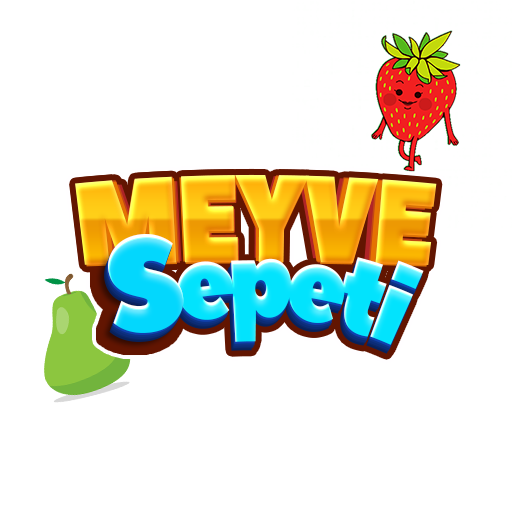
<style>
.page{position:relative;width:512px;height:512px;background:#ffffff}
.page>*{position:absolute;margin:0}
.t1{font:115px "PeaceSans";letter-spacing:-0.025em;scale:0.83 1}
.t2{font:112.7px "PeaceSans";letter-spacing:-0.025em;scale:0.83 1}
.t3{font:113.9px "PeaceSans";letter-spacing:-0.025em;scale:0.83 1}
.t4{font:110.5px "PeaceSans";letter-spacing:-0.025em;scale:0.83 1}
.t5{font:111.6px "PeaceSans";letter-spacing:-0.025em;scale:0.83 1}
.t6{font:108.3px "PeaceSans";letter-spacing:-0.025em;scale:0.83 1}
.t7{font:109.4px "PeaceSans";letter-spacing:-0.025em;scale:0.83 1}
.t8{font:107.2px "PeaceSans";letter-spacing:-0.025em;scale:0.83 1}
.t9{font:134.9px "PeaceSans";color:#03d7fd;scale:0.91 1}
.t10{font:102.9px "PeaceSans";letter-spacing:-0.075em;color:#02e3fd;scale:0.77 1}
</style>
<div class="page">
<p class="t1" style="left:75px;top:174px;width:362px;height:91px">MEYVE</p>
<p class="t2" style="left:75px;top:176px;width:355px;height:89px">MEYVE</p>
<p class="t3" style="left:76px;top:177px;width:359px;height:90px">MEYVE</p>
<p class="t4" style="left:80px;top:175px;width:348px;height:87px">MEYVE</p>
<p class="t5" style="left:80px;top:176px;width:351px;height:88px">MEYVE</p>
<p class="t6" style="left:81px;top:176px;width:341px;height:85px">MEYVE</p>
<p class="t7" style="left:83px;top:179px;width:345px;height:87px">MEYVE</p>
<p class="t8" style="left:87px;top:179px;width:337px;height:85px">MEYVE</p>
<p class="t9" style="left:108px;top:234px;width:76px;height:99px;rotate:-10deg">S</p>
<p class="t10" style="left:177px;top:257px;width:247px;height:88px;rotate:6deg">epeti</p>
</div>
